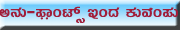
<style>
.page{position:relative;width:180px;height:30px}
.page>*{position:absolute;margin:0}
.t1{font:19.5px "Kuvempu_Eng_0005";color:#a11d39}
</style>
<div class="page">
<p class="t1" style="left:0px;top:6px;width:178px;height:17px">C£ÀÄ-¥ÁóAmïì EAzÀ PÀÄªÉA¥ÀÄ</p>
</div>
